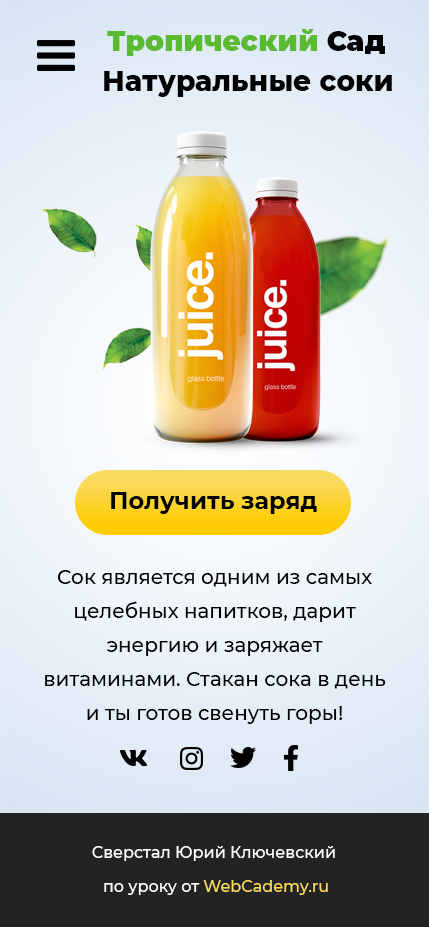
<style>
.page{position:relative;width:429px;height:927px}
.page>*{position:absolute;margin:0}
.t1{font:28px "Montserrat-Black";color:#5abb33}
.t2{font:28px "Montserrat-Black";color:#000000}
.t3{font:28px "Montserrat-ExtraBold";color:#000000}
.t4{font:24px "Montserrat-Bold";color:#000000}
.t5{font:20px/34px "Montserrat-Medium";color:#000000}
.t6{font:16px/34px "Montserrat-Medium";color:#ffffff}
.t7{font:16px/34px "Montserrat-Medium";color:#fada5a}
</style>
<div class="page">
<p class="t1" style="left:107px;top:29px;width:278px;height:27px">Тропический<span class="t2"> Сад</span></p>
<p class="t3" style="left:104px;top:71px;width:288px;height:26px">Натуральные соки</p>
<p class="t4" style="left:111px;top:492px;width:206px;height:22px">Получить заряд</p>
<p class="t5" style="left:45px;top:570px;width:341px;height:154px;text-align:center">Cок является одним из самых целебных напитков, дарит энергию и заряжает витаминами. Стакан сока в день и ты готов свенуть горы!</p>
<p class="t6" style="left:92px;top:846px;width:243px;height:49px;text-align:center">Сверстал Юрий Ключевский <br>по уроку от <span class="t7">WebCademy.ru</span></p>
</div>
